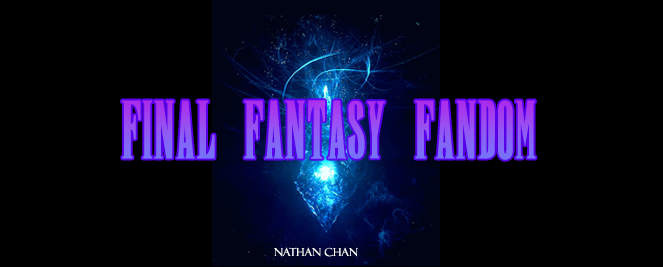
<style>
.page{position:relative;width:663px;height:267px;background:#000000}
.page>*{position:absolute;margin:0}
.t1{font:60px "New"}
.t2{font:11px "FelixTitlingMT";color:#ffffff}
</style>
<div class="page">
<p class="t1" style="left:122px;top:100px;width:414px;height:60px">FINAL FANTASY FANDOM</p>
<p class="t2" style="left:274px;top:247px;width:84px;height:10px">Nathan Chan</p>
</div>
